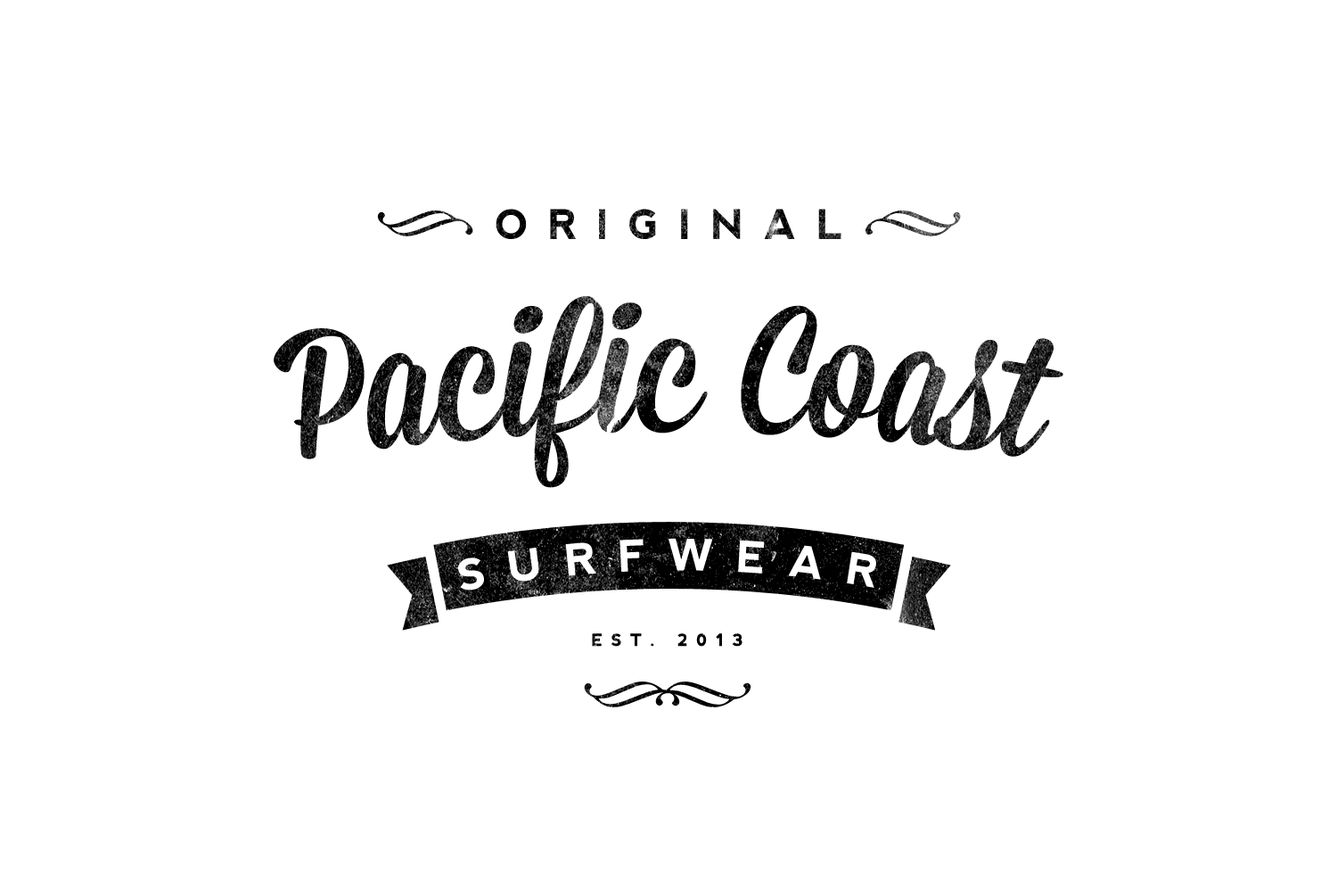
<style>
.page{position:relative;width:1337px;height:892px;background:#ffffff}
.page>*{position:absolute;margin:0}
.t1{font:40.5px "nevis-Bold";letter-spacing:0.5em;text-transform:uppercase}
.t2{font:181.5px "Mission-Script"}
.t3{font:43.3px "nevis-Bold";letter-spacing:0.5em;color:#ffffff;text-transform:uppercase}
.t4{font:16.7px "nevis-Bold";letter-spacing:0.5em;color:#000000;text-transform:uppercase}
</style>
<div class="page">
<p class="t1" style="left:496px;top:209px;width:346px;height:30px">ORIGINAL</p>
<p class="t2" style="left:274px;top:296px;width:790px;height:192px">Pacific Coast</p>
<p class="t3" style="left:458px;top:538px;width:418px;height:52px">SURFWEAR</p>
<p class="t4" style="left:592px;top:633px;width:151px;height:13px">est. 2013</p>
</div>
